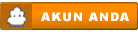
<style>
.page{position:relative;width:138px;height:32px;background:#ffffff}
.page>*{position:absolute;margin:0}
.t1{font:12px "Arial-Black";letter-spacing:0.075em;color:#ffffff}
</style>
<div class="page">
<p class="t1" style="left:41px;top:12px;width:88px;height:10px">AKUN ANDA</p>
</div>
